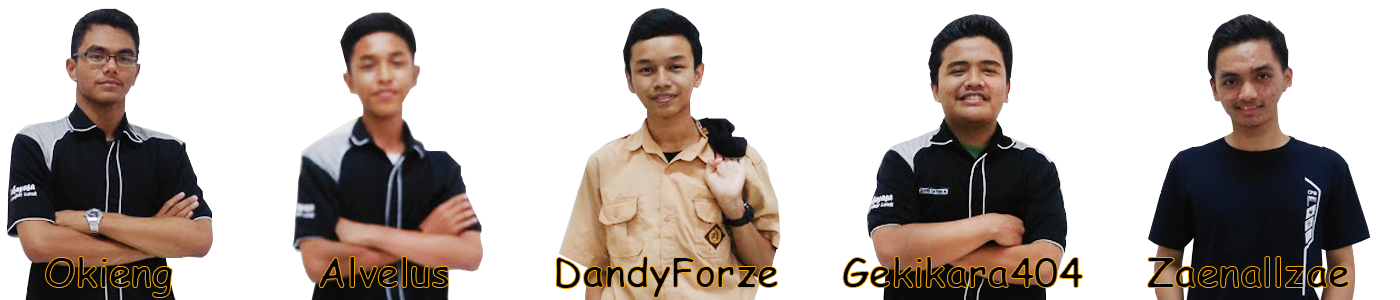
<style>
.page{position:relative;width:1400px;height:300px;background:#ffffff}
.page>*{position:absolute;margin:0}
.t1{font:40px "ComicSansMS-Bold"}
</style>
<div class="page">
<p class="t1" style="left:318px;top:256px;width:131px;height:32px">Alvelus</p>
<p class="t1" style="left:555px;top:256px;width:223px;height:42px">DandyForze</p>
<p class="t1" style="left:842px;top:256px;width:241px;height:32px">Gekikara404</p>
<p class="t1" style="left:1147px;top:256px;width:202px;height:32px">Zaenallzae</p>
</div>
